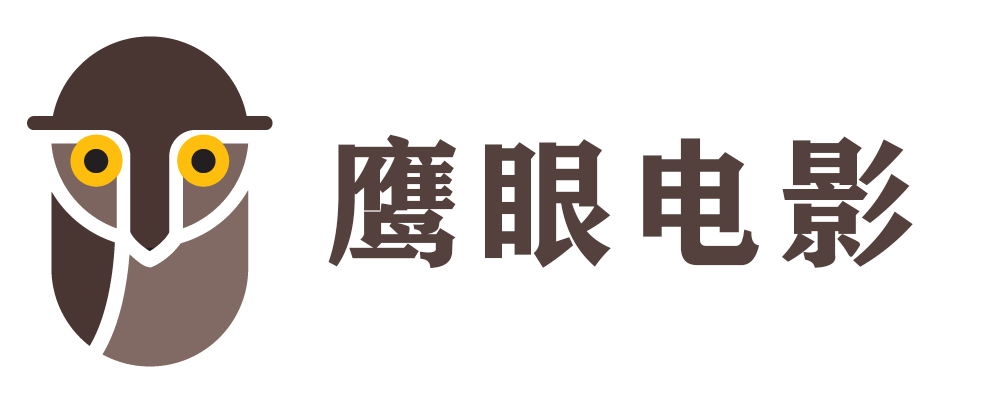
<style>
.page{position:relative;width:1000px;height:400px;background:#ffffff}
.page>*{position:absolute;margin:0}
.t1{font:140px "FZCHSJW--GB1-0";letter-spacing:0.08em;color:#54413d}
</style>
<div class="page">
<p class="t1" style="left:328px;top:134px;width:585px;height:135px">鹰眼电影</p>
</div>
